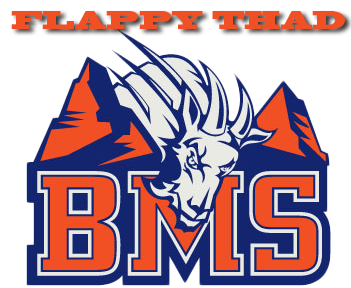
<style>
.page{position:relative;width:351px;height:288px;background:#ffffff}
.page>*{position:absolute;margin:0}
.t1{font:24px "BlackoakStd";color:#f15024;scale:0.74 1}
</style>
<div class="page">
<p class="t1" style="left:11px;top:11px;width:334px;height:18px">FLAPPY THAD</p>
</div>
